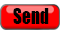
<style>
.page{position:relative;width:60px;height:30px}
.page>*{position:absolute;margin:0}
.t1{font:19.6px "Impact";color:#000000;scale:0.89 1}
</style>
<div class="page">
<p class="t1" style="left:13px;top:8px;width:36px;height:16px">Send</p>
</div>
